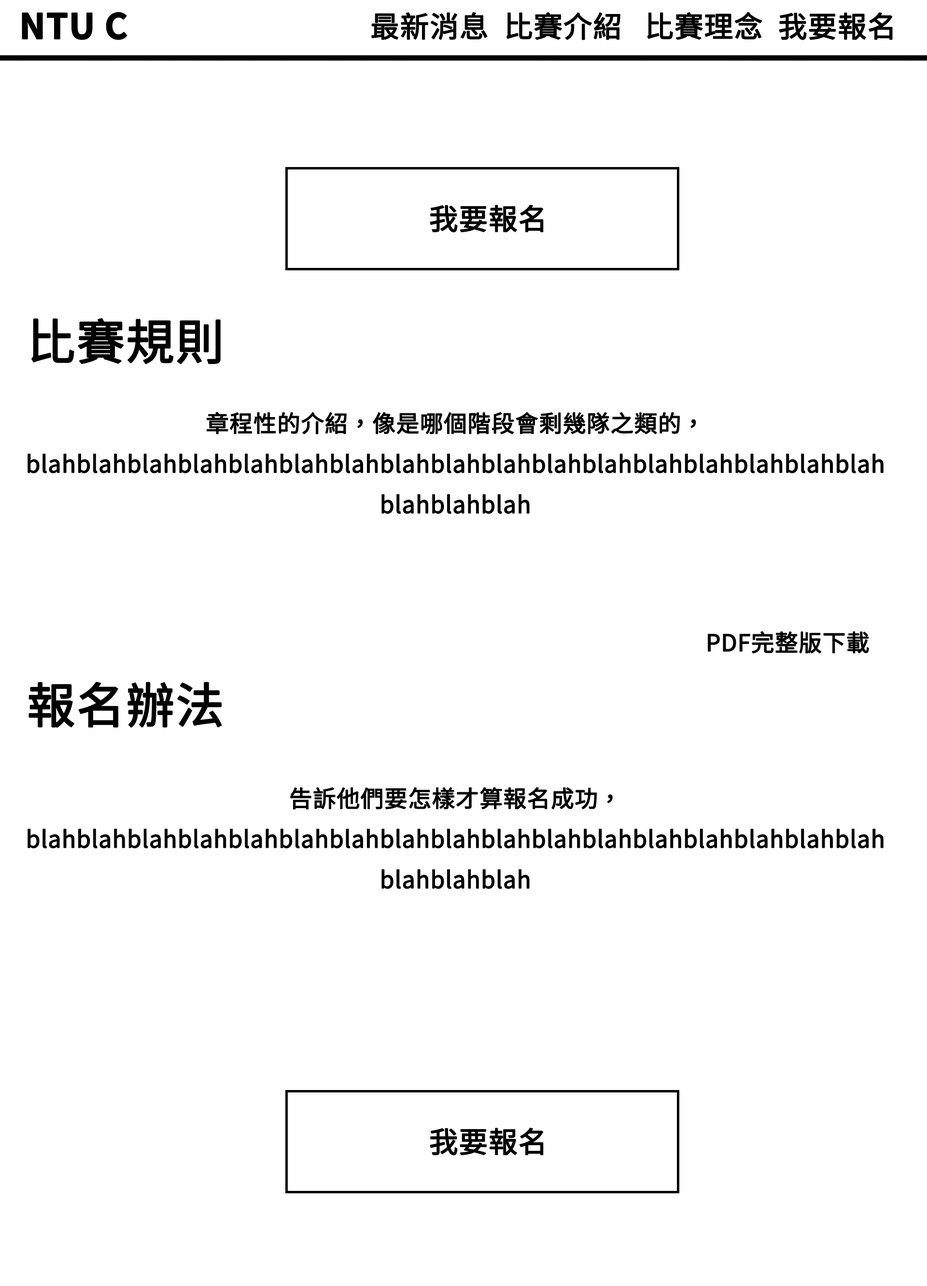
<style>
.page{position:relative;width:927px;height:1286px;background:#ffffff}
.page>*{position:absolute;margin:0}
.t1{font:34.8px "NotoSansCJKtc-Bold";color:#000000;font-weight:bold}
.t2{font:29px "NotoSansCJKtc-Regular";color:#000000;font-weight:bold}
.t3{font:48.3px "NotoSansCJKtc-Regular";color:#000000;font-weight:bold}
.t4{font:23.2px "NotoSansCJKtc-Regular";color:#000000;font-weight:bold}
</style>
<div class="page">
<p class="t1" style="left:22px;top:12px;width:105px;height:28px">NTU C</p>
<p class="t2" style="left:371px;top:12px;width:522px;height:28px">最新消息  比賽介紹   比賽理念  我要報名</p>
<p class="t2" style="left:430px;top:205px;width:114px;height:28px">我要報名</p>
<p class="t3" style="left:31px;top:318px;width:190px;height:47px">比賽規則</p>
<p class="t4" style="left:28px;top:412px;width:856px;height:102px;text-align:center">章程性的介紹，像是哪個階段會剩幾隊之類的，blahblahblahblahblahblahblahblahblahblahblahblahblahblahblahblahblahblahblahblah</p>
<p class="t4" style="left:708px;top:631px;width:161px;height:23px">PDF完整版下載</p>
<p class="t3" style="left:28px;top:682px;width:194px;height:46px">報名辦法</p>
<p class="t4" style="left:28px;top:787px;width:856px;height:102px;text-align:center">告訴他們要怎樣才算報名成功，blahblahblahblahblahblahblahblahblahblahblahblahblahblahblahblahblahblahblahblah</p>
<p class="t2" style="left:430px;top:1128px;width:114px;height:28px">我要報名</p>
</div>
